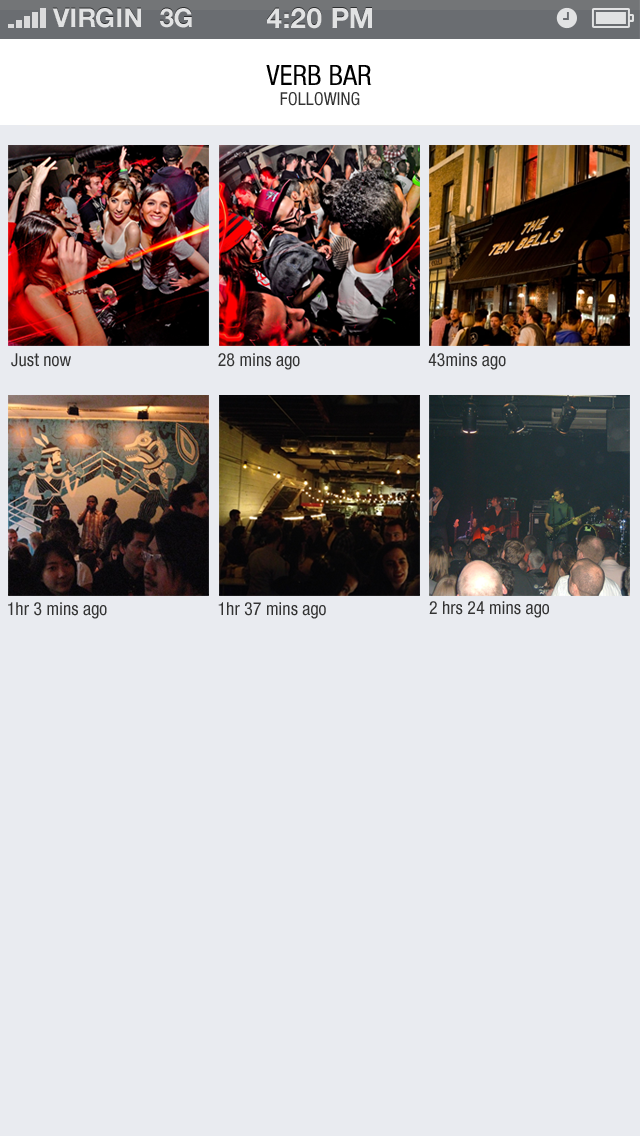
<style>
.page{position:relative;width:640px;height:1136px;background:#e9ebf0}
.page>*{position:absolute;margin:0}
.t1{font:26px "HelveticaNeue-Bold";color:#e1e2e3;text-transform:uppercase}
.t2{font:28px "HelveticaNeue-Bold";color:#e1e2e3;text-transform:uppercase}
.t3{font:28px "HelveticaNeueLTPro-Cn";color:#000000}
.t4{font:18px "HelveticaNeueLTPro-Cn";color:#333333}
</style>
<div class="page">
<p class="t1" style="left:52px;top:8px;width:89px;height:20px">VIRGIN</p>
<p class="t1" style="left:160px;top:8px;width:32px;height:20px">3G</p>
<p class="t2" style="left:267px;top:8px;width:105px;height:21px">4:20 pM</p>
<p class="t3" style="left:266px;top:65px;width:106px;height:20px">VERB BAR</p>
<p class="t4" style="left:280px;top:92px;width:80px;height:14px">FOLLOWING</p>
<p class="t4" style="left:11px;top:353px;width:60px;height:14px">Just now</p>
<p class="t4" style="left:218px;top:353px;width:82px;height:17px">28 mins ago</p>
<p class="t4" style="left:428px;top:353px;width:78px;height:17px">43mins ago</p>
<p class="t4" style="left:8px;top:602px;width:99px;height:17px">1hr 3 mins ago</p>
<p class="t4" style="left:218px;top:602px;width:108px;height:17px">1hr 37 mins ago</p>
<p class="t4" style="left:429px;top:601px;width:120px;height:17px">2 hrs 24 mins ago</p>
</div>
